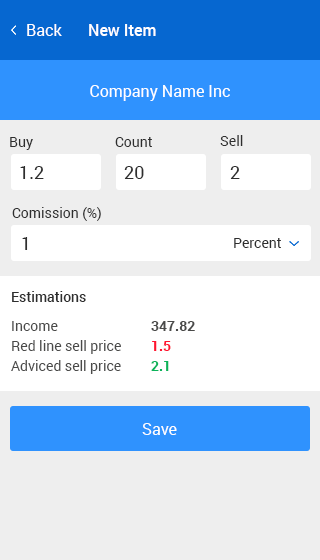
<style>
.page{position:relative;width:320px;height:560px;background:#eeeeee}
.page>*{position:absolute;margin:0}
.t1{font:16px "Roboto-Regular";color:#ffffff}
.t2{font:16px "Roboto-Medium";color:#ffffff}
.t3{font:14px "Roboto-Regular";color:#2e2e2e}
.t4{font:18px "Roboto-Regular";color:#2e2e2e}
.t5{font:14px "Roboto-Medium";color:#2e2e2e}
.t6{font:14px/20px "Roboto-Regular";color:#4a4a49}
.t7{font:14px/20px "Roboto-Bold";color:#4a4a49}
.t8{font:14px/20px "Roboto-Bold";color:#ff1430}
.t9{font:14px/20px "Roboto-Bold";color:#0bb35a}
</style>
<div class="page">
<p class="t1" style="left:27px;top:24px;width:35px;height:12px">Back</p>
<p class="t2" style="left:89px;top:24px;width:67px;height:12px">New Item</p>
<p class="t1" style="left:90px;top:85px;width:140px;height:16px">Company Name Inc</p>
<p class="t3" style="left:10px;top:137px;width:23px;height:13px">Buy</p>
<p class="t3" style="left:115px;top:137px;width:37px;height:10px">Count</p>
<p class="t3" style="left:220px;top:135px;width:23px;height:11px">Sell</p>
<p class="t4" style="left:20px;top:166px;width:24px;height:13px">1.2</p>
<p class="t4" style="left:124px;top:166px;width:20px;height:13px">20</p>
<p class="t4" style="left:230px;top:166px;width:10px;height:13px">2</p>
<p class="t3" style="left:12px;top:207px;width:89px;height:14px">Comission (%)</p>
<p class="t4" style="left:22px;top:237px;width:6px;height:13px">1</p>
<p class="t3" style="left:234px;top:238px;width:47px;height:10px">Percent</p>
<p class="t5" style="left:12px;top:291px;width:74px;height:11px">Estimations</p>
<p class="t6" style="left:11px;top:321px;width:110px;height:53px">Income<br>Red line sell price<br>Adviced sell price</p>
<p class="t7" style="left:151px;top:321px;width:44px;height:50px">347.82<br><span class="t8">1.5<br></span><span class="t9">2.1</span></p>
<p class="t1" style="left:142px;top:423px;width:35px;height:12px">Save</p>
</div>
